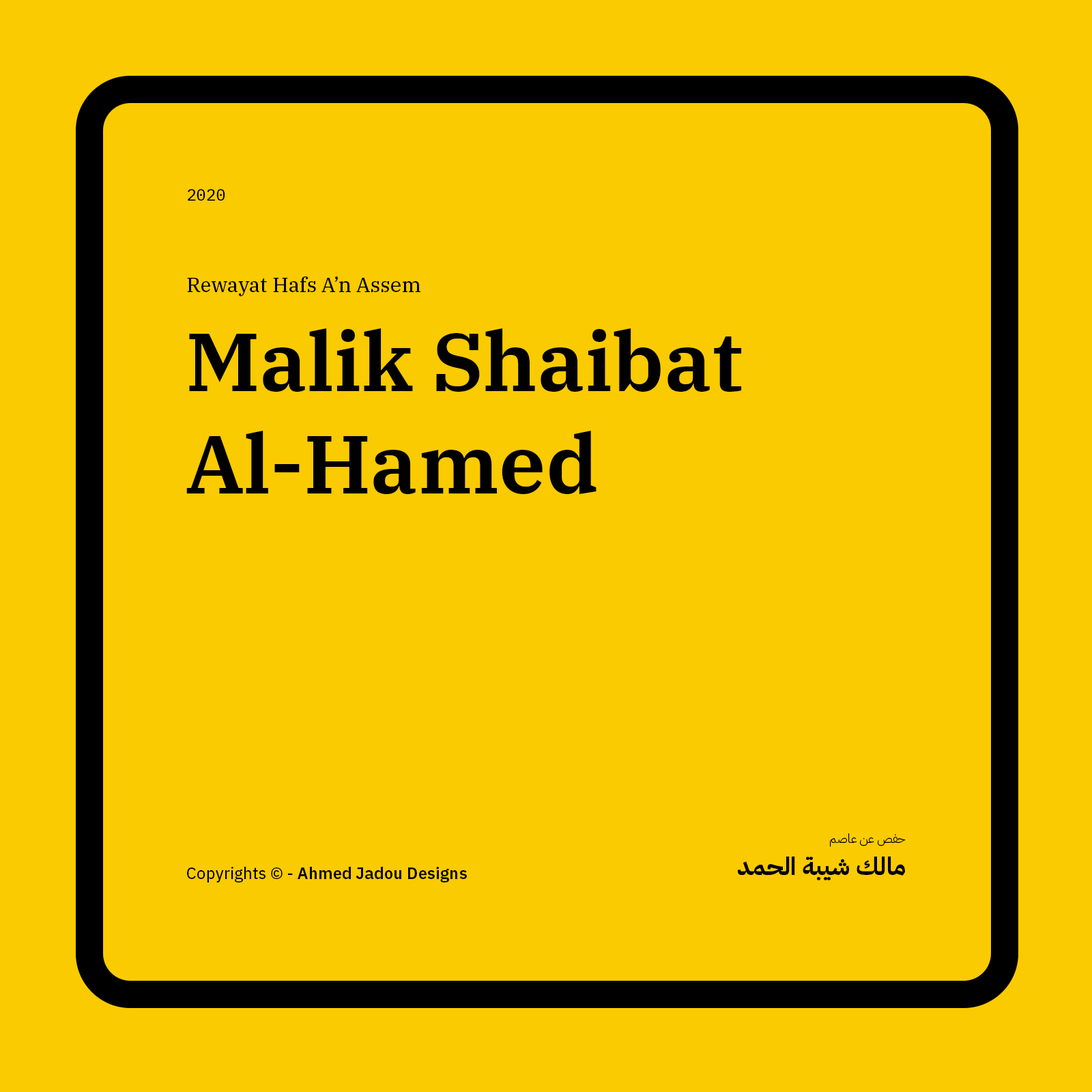
<style>
.page{position:relative;width:1092px;height:1092px;background:#facb00}
.page>*{position:absolute;margin:0}
.t1{font:16.4px "IBMPlexMono-Text";color:#000000}
.t2{font:20.5px "IBMPlexSerif-Text";color:#000000}
.t3{font:81.9px/102.7px "IBMPlexSerif-SemiBold";color:#000000}
.t4{font:12.3px "IBMPlexArabic-Light";color:#000000}
.t5{font:24.6px "IBMPlexArabic-Bold";color:#000000}
.t6{font:16.4px "IBMPlexSans-SemiBold";color:#000000}
.t7{font:16.4px "IBMPlexSans-Text";color:#000000}
</style>
<div class="page">
<p class="t1" style="left:188px;top:189px;width:37px;height:12px">2020</p>
<p class="t2" style="left:187px;top:276px;width:233px;height:20px">Rewayat Hafs A’n Assem</p>
<p class="t3" style="left:186px;top:328px;width:556px;height:166px">Malik Shaibat Al-Hamed</p>
<p class="t4" style="left:830px;top:833px;width:76px;height:14px">حفص عن عاصم</p>
<p class="t5" style="left:738px;top:857px;width:167px;height:23px">مالك شيبة الحمد</p>
<p class="t6" style="left:187px;top:867px;width:280px;height:15px"><span class="t7">Copyrights © - </span>Ahmed Jadou Designs</p>
</div>
